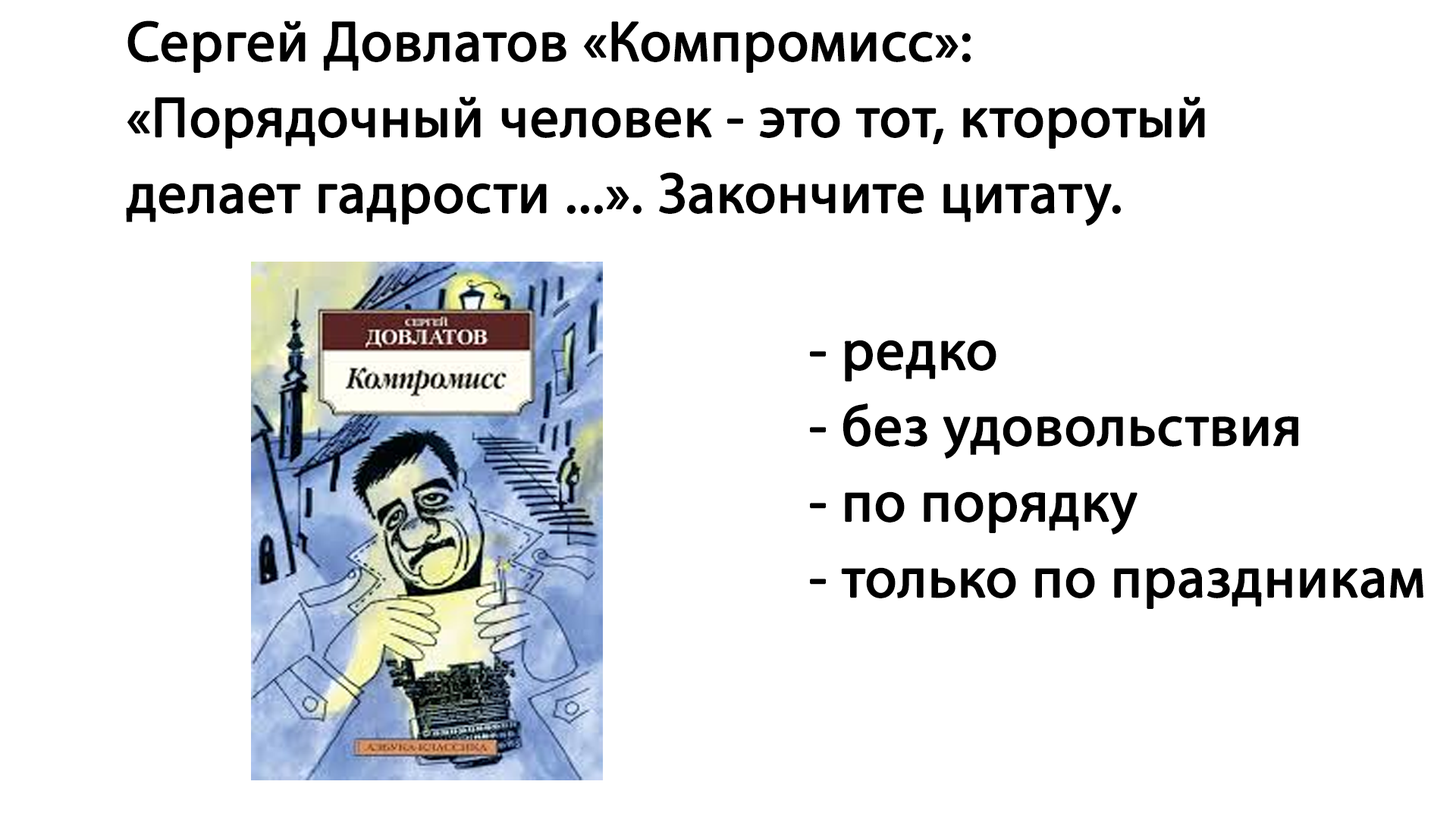
<style>
.page{position:relative;width:1456px;height:819px;background:#ffffff}
.page>*{position:absolute;margin:0}
.t1{font:56.9px/75.8px "MyriadPro-Regular";color:#000000;font-weight:bold}
</style>
<div class="page">
<p class="t1" style="left:126px;top:20px;width:1079px;height:206px">Сергей Довлатов «Компромисс»: <br>«Порядочный человек - это тот, кторотый <br>делает гадрости ...». Закончите цитату.</p>
<p class="t1" style="left:810px;top:340px;width:613px;height:269px">- редко<br>- без удовольствия<br>- по порядку<br>- только по праздникам</p>
</div>
